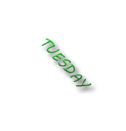
<style>
.page{position:relative;width:126px;height:131px;background:#ffffff}
.page>*{position:absolute;margin:0}
.t1{font:14px "MVBoli";text-transform:uppercase}
</style>
<div class="page">
<p class="t1" style="left:41px;top:38px;width:51px;height:49px;rotate:48deg">TUESDAY</p>
</div>
